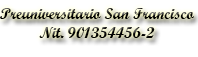
<style>
.page{position:relative;width:198px;height:57px;background:#ffffff}
.page>*{position:absolute;margin:0}
.t1{font:16px "ScriptMTBold"}
</style>
<div class="page">
<p class="t1" style="left:0px;top:8px;width:194px;height:30px;text-align:center">Preuniversitario San Francisco<br>Nit. 901354456-2</p>
</div>
